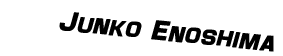
<style>
.page{position:relative;width:283px;height:56px;background:#ffffff}
.page>*{position:absolute;margin:0}
.t1{font:28px "Maximus";color:#000000;font-weight:bold;font-style:italic}
</style>
<div class="page">
<p class="t1" style="left:59px;top:12px;width:215px;height:40px;rotate:6deg">Junko Enoshima</p>
</div>
